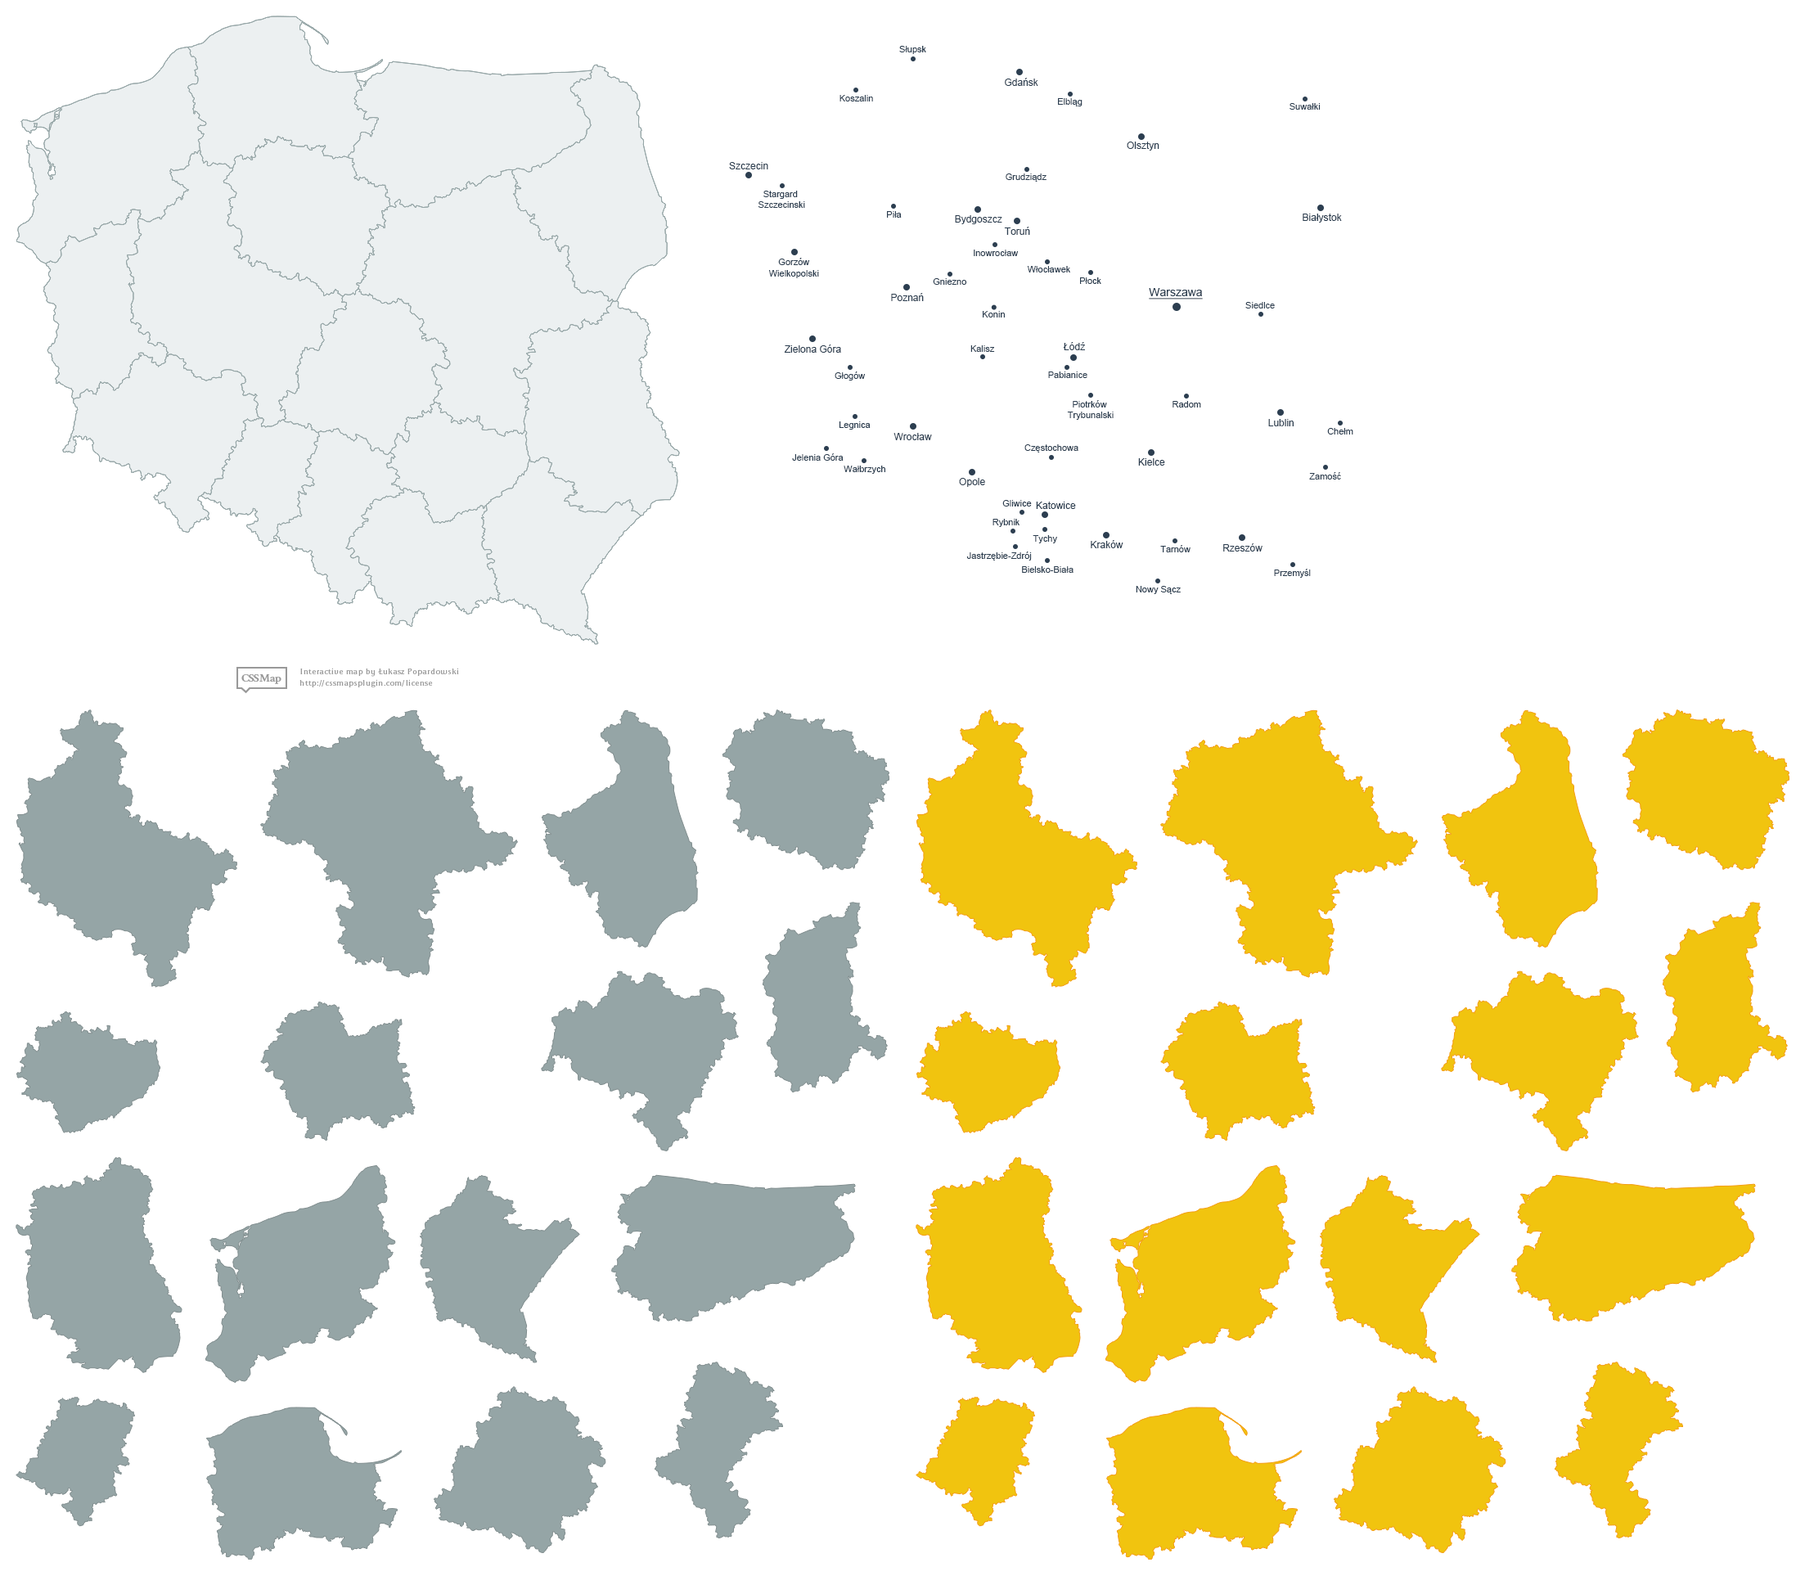
<style>
.page{position:relative;width:1805px;height:1576px;background:#ffffff}
.page>*{position:absolute;margin:0}
.t1{font:9px "ArialMT";color:#2c3e50}
.t2{font:9.8px "ArialMT";color:#2c3e50}
.t3{font:11.5px "ArialMT";color:#2c3e50;text-decoration:underline}
</style>
<div class="page">
<p class="t1" style="left:899px;top:46px;width:27px;height:8px">Słupsk</p>
<p class="t2" style="left:1005px;top:78px;width:33px;height:8px">Gdańsk</p>
<p class="t1" style="left:839px;top:95px;width:34px;height:6px">Koszalin</p>
<p class="t1" style="left:1058px;top:98px;width:24px;height:8px">Elbląg</p>
<p class="t1" style="left:1289px;top:103px;width:32px;height:7px">Suwałki</p>
<p class="t2" style="left:1127px;top:142px;width:32px;height:9px">Olsztyn</p>
<p class="t2" style="left:729px;top:162px;width:39px;height:7px">Szczecin</p>
<p class="t1" style="left:1006px;top:173px;width:40px;height:9px">Grudziądz</p>
<p class="t1" style="left:758px;top:191px;width:47px;height:17px;text-align:center">Stargard <br>Szczecinski</p>
<p class="t1" style="left:887px;top:211px;width:15px;height:7px">Piła</p>
<p class="t2" style="left:955px;top:215px;width:47px;height:9px">Bydgoszcz</p>
<p class="t2" style="left:1303px;top:214px;width:39px;height:9px">Białystok</p>
<p class="t2" style="left:1004px;top:227px;width:26px;height:8px">Toruń</p>
<p class="t1" style="left:768px;top:258px;width:51px;height:20px;text-align:center">Gorzów<br>Wielkopolski</p>
<p class="t1" style="left:974px;top:250px;width:45px;height:6px">Inowrocław</p>
<p class="t1" style="left:1027px;top:266px;width:43px;height:6px">Włocławek</p>
<p class="t1" style="left:933px;top:278px;width:34px;height:7px">Gniezno</p>
<p class="t1" style="left:1080px;top:277px;width:21px;height:7px">Płock</p>
<p class="t2" style="left:891px;top:293px;width:33px;height:8px">Poznań</p>
<p class="t3" style="left:1149px;top:288px;width:54px;height:11px">Warszawa</p>
<p class="t1" style="left:1245px;top:302px;width:30px;height:6px">Siedlce</p>
<p class="t1" style="left:983px;top:311px;width:22px;height:6px">Konin</p>
<p class="t2" style="left:1063px;top:342px;width:22px;height:8px">Łódź</p>
<p class="t2" style="left:784px;top:344px;width:57px;height:9px">Zielona Góra</p>
<p class="t1" style="left:970px;top:345px;width:25px;height:7px">Kalisz</p>
<p class="t1" style="left:835px;top:371px;width:31px;height:9px">Głogów</p>
<p class="t1" style="left:1048px;top:371px;width:39px;height:7px">Pabianice</p>
<p class="t1" style="left:1067px;top:400px;width:47px;height:20px;text-align:center">Piotrków <br>Trybunalski</p>
<p class="t1" style="left:1172px;top:401px;width:29px;height:6px">Radom</p>
<p class="t1" style="left:839px;top:421px;width:32px;height:9px">Legnica</p>
<p class="t2" style="left:1268px;top:419px;width:26px;height:7px">Lublin</p>
<p class="t2" style="left:893px;top:433px;width:39px;height:7px">Wrocław</p>
<p class="t1" style="left:1327px;top:428px;width:26px;height:6px">Chełm</p>
<p class="t1" style="left:1024px;top:444px;width:54px;height:8px">Częstochowa</p>
<p class="t1" style="left:792px;top:453px;width:52px;height:8px">Jelenia Góra</p>
<p class="t2" style="left:1138px;top:458px;width:27px;height:8px">Kielce</p>
<p class="t1" style="left:844px;top:466px;width:41px;height:8px">Wałbrzych</p>
<p class="t1" style="left:1309px;top:472px;width:32px;height:7px">Zamość</p>
<p class="t2" style="left:959px;top:478px;width:26px;height:9px">Opole</p>
<p class="t1" style="left:1002px;top:500px;width:30px;height:6px">Gliwice</p>
<p class="t2" style="left:1036px;top:502px;width:40px;height:7px">Katowice</p>
<p class="t1" style="left:992px;top:519px;width:27px;height:8px">Rybnik</p>
<p class="t1" style="left:1033px;top:535px;width:24px;height:8px">Tychy</p>
<p class="t2" style="left:1091px;top:540px;width:32px;height:8px">Kraków</p>
<p class="t1" style="left:1160px;top:545px;width:30px;height:7px">Tarnów</p>
<p class="t2" style="left:1223px;top:543px;width:39px;height:8px">Rzeszów</p>
<p class="t1" style="left:966px;top:551px;width:66px;height:9px">Jastrzębie-Zdrój</p>
<p class="t1" style="left:1022px;top:566px;width:51px;height:7px">Bielsko-Biała</p>
<p class="t1" style="left:1274px;top:569px;width:37px;height:9px">Przemyśl</p>
<p class="t1" style="left:1136px;top:586px;width:45px;height:8px">Nowy Sącz</p>
</div>
